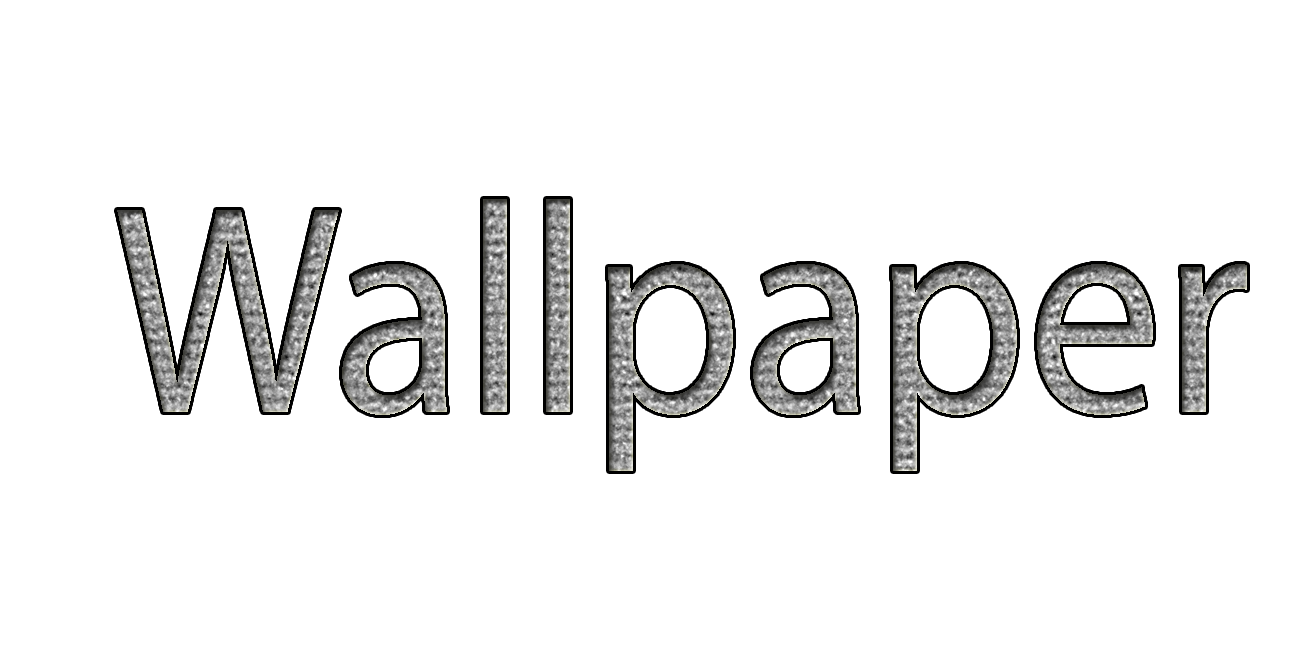
<style>
.page{position:relative;width:1300px;height:650px;background:#ffffff}
.page>*{position:absolute;margin:0}
.t1{font:300px "MyriadPro-Regular";scale:0.9 1}
</style>
<div class="page">
<p class="t1" style="left:117px;top:199px;width:1130px;height:272px">Wallpaper</p>
</div>
